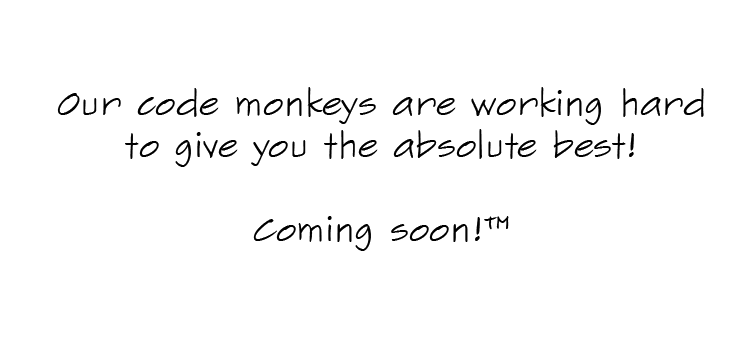
<style>
.page{position:relative;width:755px;height:350px;background:#ffffff}
.page>*{position:absolute;margin:0}
.t1{font:35px "SketchFlowPrint";color:#000000}
</style>
<div class="page">
<p class="t1" style="left:57px;top:87px;width:647px;height:164px;text-align:center">Our code monkeys are working hard<br>to give you the absolute best!<br><br>Coming soon!™</p>
</div>
